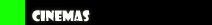
<style>
.page{position:relative;width:212px;height:25px;background:#000000}
.page>*{position:absolute;margin:0}
.t1{font:14px "ShowcardGothic-Reg";color:#ffffff}
</style>
<div class="page">
<p class="t1" style="left:32px;top:10px;width:58px;height:12px">Cinemas</p>
</div>
